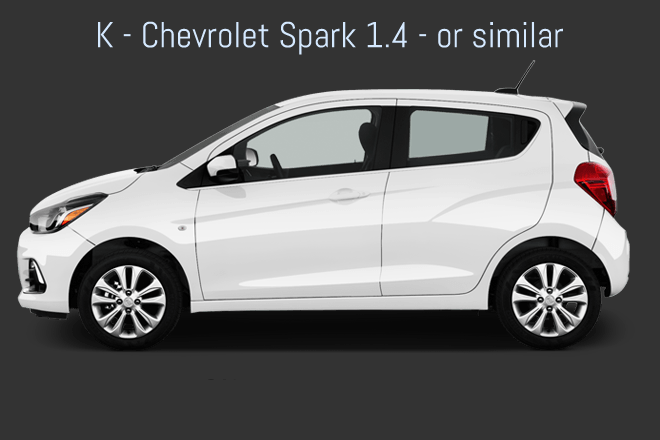
<style>
.page{position:relative;width:660px;height:440px;background:#333333}
.page>*{position:absolute;margin:0}
.t1{font:36px "Abel-Regular";color:#d5e9ff}
</style>
<div class="page">
<p class="t1" style="left:97px;top:21px;width:466px;height:34px">K - Chevrolet Spark 1.4 - or similar</p>
</div>
